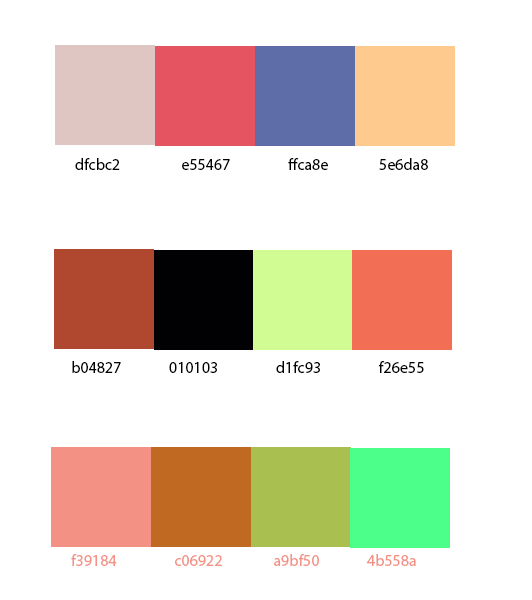
<style>
.page{position:relative;width:532px;height:600px;background:#ffffff}
.page>*{position:absolute;margin:0}
.t1{font:16px "MyriadPro-Regular";color:#000000}
.t2{font:14px "MyriadPro-Regular";color:#000000}
.t3{font:16px "MyriadPro-Regular";color:#f39184}
</style>
<div class="page">
<p class="t1" style="left:75px;top:158px;width:353px;height:12px"><span class="t2">         </span> dfcbc2                  e55467                 ffca8e               5e6da8</p>
<p class="t1" style="left:72px;top:361px;width:352px;height:12px">b04827              010103                 d1fc93                 f26e55</p>
<p class="t3" style="left:71px;top:554px;width:345px;height:12px">f39184                 c06922               a9bf50              4b558a</p>
</div>
